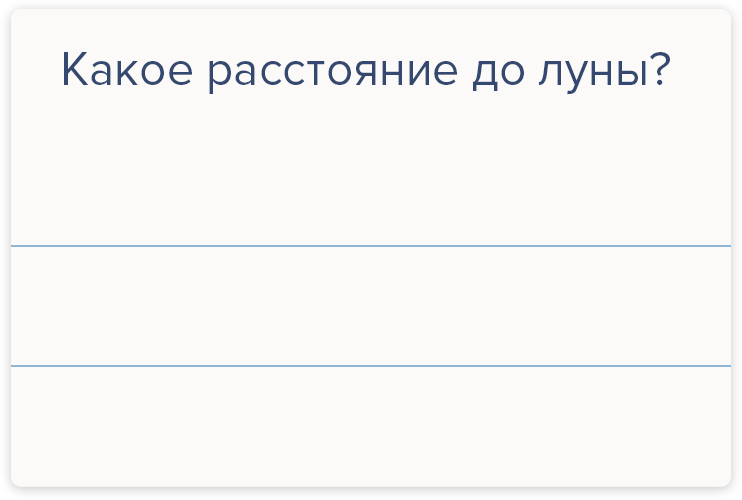
<style>
.page{position:relative;width:742px;height:500px;background:#fbfaf8}
.page>*{position:absolute;margin:0}
.t1{font:48px "ProximaNova-Regular";color:#344870}
</style>
<div class="page">
<p class="t1" style="left:64px;top:52px;width:606px;height:42px">Какое расстояние до луны?</p>
</div>
